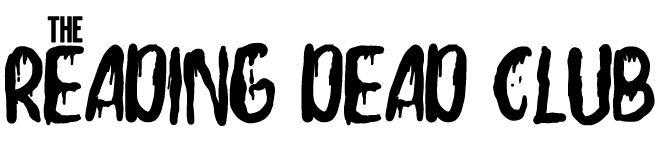
<style>
.page{position:relative;width:662px;height:168px;background:#ffffff}
.page>*{position:absolute;margin:0}
.t1{font:36.5px "Milkstore02-Clean";letter-spacing:-0.05em;color:#000000;font-weight:bold}
.t2{font:112.1px "SkeletonBlood";letter-spacing:-0.05em;color:#000000;font-weight:bold}
</style>
<div class="page">
<p class="t1" style="left:47px;top:16px;width:36px;height:27px">THE</p>
<p class="t2" style="left:4px;top:42px;width:651px;height:84px">READING DEAD club</p>
</div>
